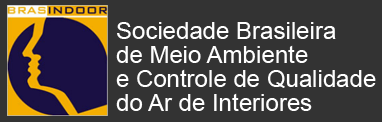
<style>
.page{position:relative;width:382px;height:122px;background:#333333}
.page>*{position:absolute;margin:0}
.t1{font:24px/24px "ArialMT";color:#ffffff}
</style>
<div class="page">
<p class="t1" style="left:116px;top:22px;width:260px;height:89px">Sociedade Brasileira <br>de Meio Ambiente<br>e Controle de Qualidade<br>do Ar de Interiores</p>
</div>
